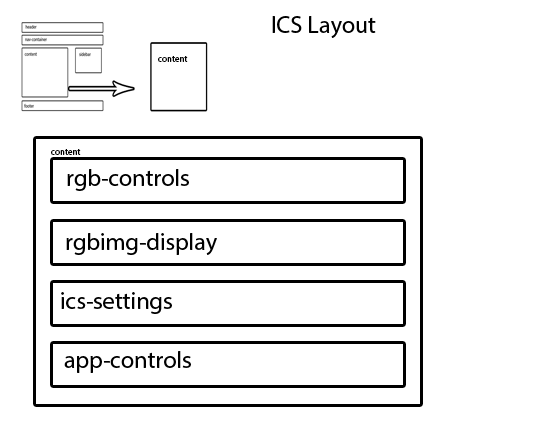
<style>
.page{position:relative;width:560px;height:435px;background:#ffffff}
.page>*{position:absolute;margin:0}
.t1{font:24px "MyriadPro-Regular";color:#000000}
.t2{font:9px "MyriadPro-Regular";color:#000000}
</style>
<div class="page">
<p class="t1" style="left:272px;top:16px;width:104px;height:22px">ICS Layout</p>
<p class="t2" style="left:158px;top:56px;width:30px;height:6px">content</p>
<p class="t2" style="left:51px;top:149px;width:30px;height:6px">content</p>
<p class="t1" style="left:67px;top:169px;width:122px;height:22px">rgb-controls</p>
<p class="t1" style="left:66px;top:233px;width:151px;height:22px">rgbimg-display</p>
<p class="t1" style="left:61px;top:292px;width:111px;height:22px">ics-settings</p>
<p class="t1" style="left:64px;top:351px;width:127px;height:22px">app-controls</p>
</div>
